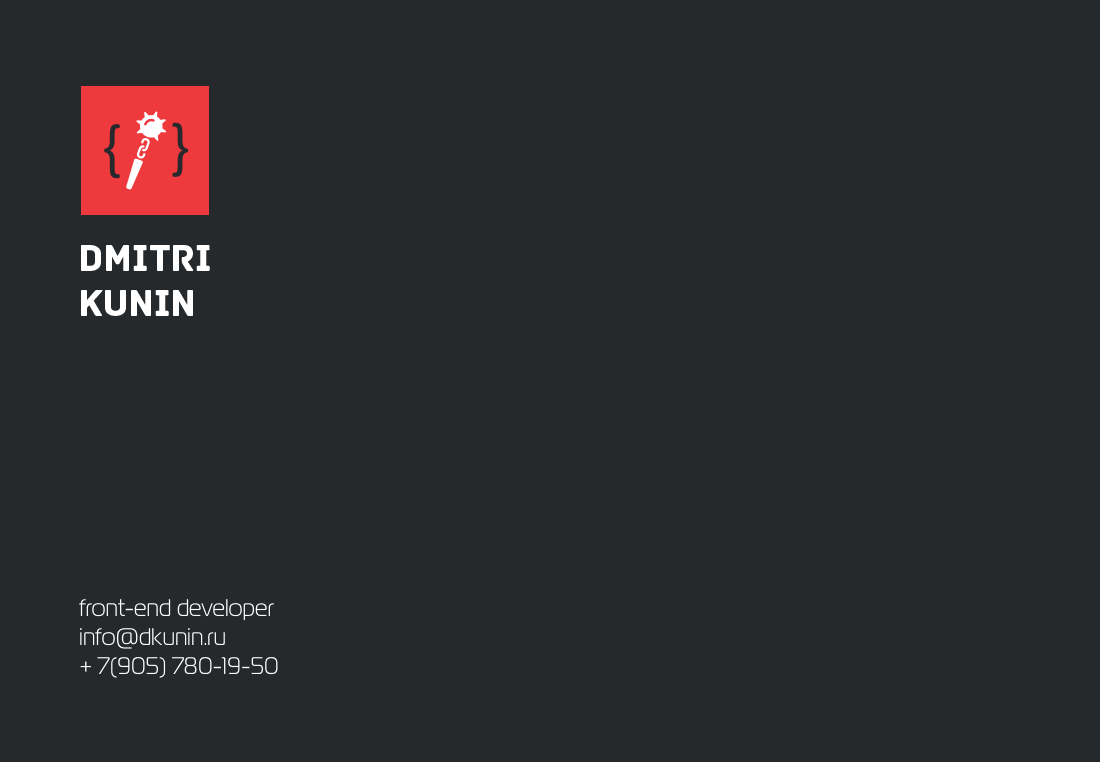
<style>
.page{position:relative;width:1100px;height:762px;background:#26292c}
.page>*{position:absolute;margin:0}
.t1{font:38px "Archive";color:#ffffff;text-transform:uppercase}
.t2{font:24px "MagistralC";color:#ffffff}
</style>
<div class="page">
<p class="t1" style="left:81px;top:245px;width:129px;height:71px">Dmitri Kunin</p>
<p class="t2" style="left:79px;top:599px;width:199px;height:79px">front-end developer<br>info@dkunin.ru<br>+ 7(905) 780-19-50</p>
</div>
